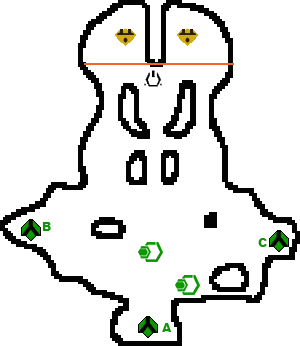
<style>
.page{position:relative;width:300px;height:346px;background:#ffffff}
.page>*{position:absolute;margin:0}
.t1{font:12px "Arial-Black";color:#0c9801}
</style>
<div class="page">
<p class="t1" style="left:42px;top:222px;width:9px;height:9px">B</p>
<p class="t1" style="left:258px;top:238px;width:9px;height:9px">C</p>
<p class="t1" style="left:162px;top:323px;width:10px;height:9px">A</p>
</div>
